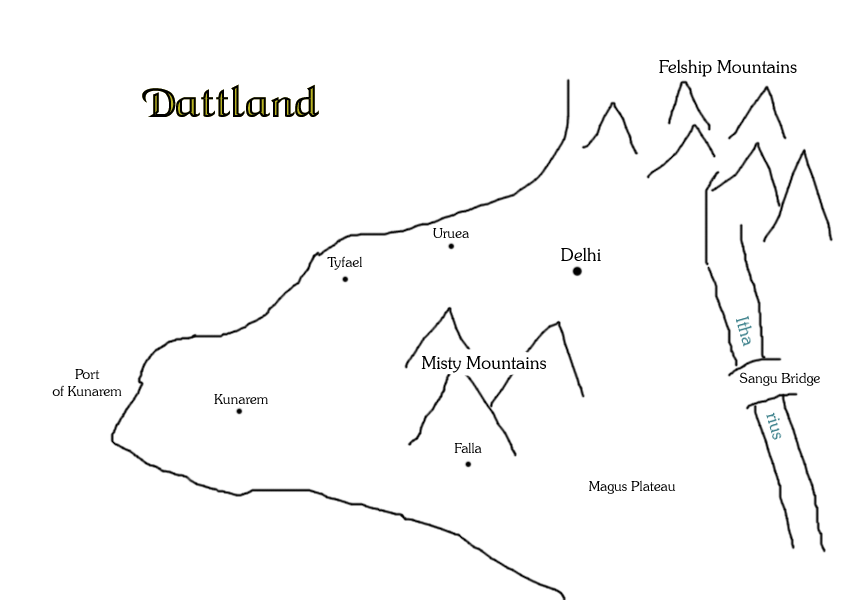
<style>
.page{position:relative;width:850px;height:600px;background:#ffffff}
.page>*{position:absolute;margin:0}
.t1{font:18px "SouvenirITCbyBT-Light";color:#000000}
.t2{font:14px "SouvenirITCbyBT-Light";color:#000000}
</style>
<div class="page">
<p class="t1" style="left:659px;top:59px;width:138px;height:18px">Felship Mountains</p>
<p class="t2" style="left:433px;top:228px;width:36px;height:10px">Uruea</p>
<p class="t2" style="left:327px;top:256px;width:35px;height:14px">Tyfael</p>
<p class="t1" style="left:561px;top:247px;width:40px;height:14px">Delhi</p>
<p class="t1" style="left:421px;top:356px;width:125px;height:17px">Misty Mountains</p>
<p class="t2" style="left:52px;top:369px;width:70px;height:27px;text-align:center">Port<br>of Kunarem</p>
<p class="t2" style="left:739px;top:372px;width:81px;height:14px">Sangu Bridge</p>
<p class="t2" style="left:214px;top:394px;width:54px;height:10px">Kunarem</p>
<p class="t2" style="left:454px;top:442px;width:28px;height:11px">Falla</p>
<p class="t2" style="left:589px;top:480px;width:87px;height:14px">Magus Plateau</p>
</div>
